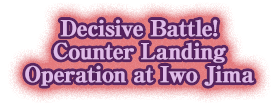
<style>
.page{position:relative;width:275px;height:107px;background:#ffffff}
.page>*{position:absolute;margin:0}
.t1{font:22px/23px "RyuminPro-ExBold";letter-spacing:-0.04em;color:#e0bbe8;font-weight:bold}
</style>
<div class="page">
<p class="t1" style="left:25px;top:19px;width:229px;height:67px;text-align:center">Decisive Battle!<br>Counter Landing<br>Operation at Iwo Jima</p>
</div>
